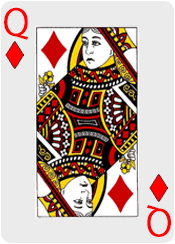
<style>
.page{position:relative;width:175px;height:244px;background:#ebebeb}
.page>*{position:absolute;margin:0}
.t1{font:36px "KozGoPr6N-Regular";color:#ff0000}
</style>
<div class="page">
<p class="t1" style="left:4px;top:7px;width:24px;height:33px">Q</p>
<p class="t1" style="left:147px;top:205px;width:24px;height:32px;rotate:-180deg">Q</p>
</div>
